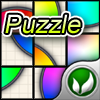
<style>
.page{position:relative;width:100px;height:100px}
.page>*{position:absolute;margin:0}
.t1{font:25.4px "ArialMT";font-style:italic}
</style>
<div class="page">
<p class="t1" style="left:5px;top:14px;width:76px;height:20px">Puzzle</p>
</div>
